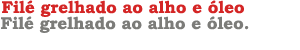
<style>
.page{position:relative;width:300px;height:50px;background:#ffffff}
.page>*{position:absolute;margin:0}
.t1{font:17px "BookmanOldStyle-Bold";color:#d42525}
.t2{font:17px "BookmanOldStyle-Bold";color:#7c7c79}
</style>
<div class="page">
<p class="t1" style="left:2px;top:0px;width:242px;height:17px">Filé grelhado ao alho e óleo</p>
<p class="t2" style="left:1px;top:16px;width:248px;height:17px">Filé grelhado ao alho e óleo.</p>
</div>
